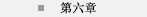
<style>
.page{position:relative;width:147px;height:17px;background:#f1f1f1}
.page>*{position:absolute;margin:0}
.t1{font:12px "SimSun";color:#000000;font-weight:bold}
</style>
<div class="page">
<p class="t1" style="left:40px;top:0px;width:77px;height:17px">第六章</p>
</div>
